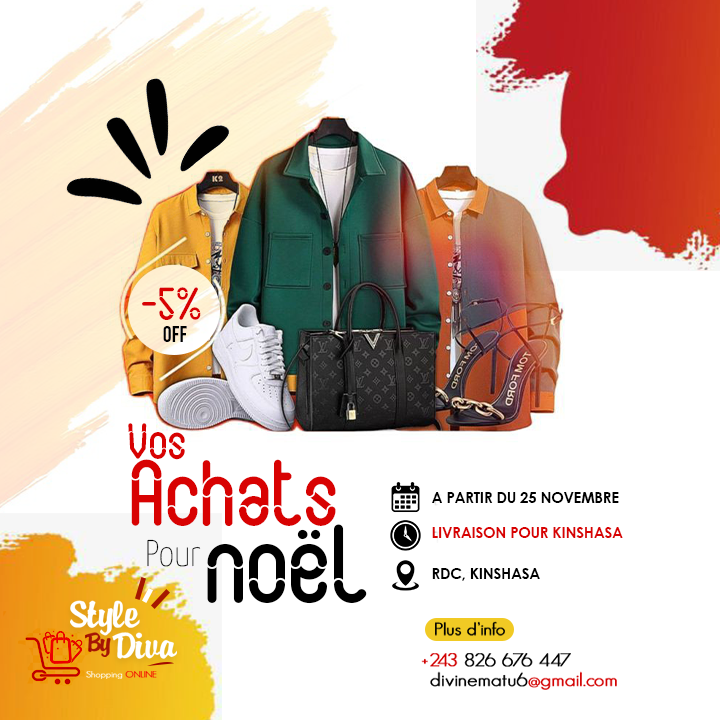
<style>
.page{position:relative;width:720px;height:720px;background:#ffffff}
.page>*{position:absolute;margin:0}
.t1{font:46.7px "Slot-Regular";color:#d80202}
.t2{font:22.4px "BebasNeue-Regular";color:#000000}
.t3{font:51.1px "Slot-Regular";color:#d80202}
.t4{font:94.8px "Slot-Regular";color:#d80202}
.t5{font:14.6px "CenturyGothic-Bold";color:#000000;text-transform:uppercase}
.t6{font:112.5px "Slot-Regular";color:#000000}
.t7{font:14.6px "CenturyGothic-Bold";color:#d80202;text-transform:uppercase}
.t8{font:37px "YanoneKaffeesatz-ExtraLight";color:#000000}
.t9{font:37.7px "Fixthephoto---Buke";color:#ffffff;scale:1.11 1}
.t10{font:16.8px "GeosansLight";color:#000000;font-weight:bold;scale:1.11 1}
.t11{font:26.8px "Fixthephoto---Buke";color:#a51505;scale:1.11 1}
.t12{font:36px "Fixthephoto---Buke";color:#ffffff;scale:1.11 1}
.t13{font:18.1px "GeosansLight";color:#000000;font-weight:bold;scale:1.11 1}
.t14{font:18.1px "GeosansLight";color:#d00000;font-weight:bold;scale:1.11 1}
.t15{font:8.8px "GeosansLight";font-weight:bold;scale:1.11 1}
.t16{font:18.1px "GeosansLight";color:#d30000;font-weight:bold;scale:1.11 1}
</style>
<div class="page">
<p class="t1" style="left:142px;top:287px;width:59px;height:33px">-5%</p>
<p class="t2" style="left:163px;top:326px;width:24px;height:16px">OFF</p>
<p class="t3" style="left:128px;top:423px;width:57px;height:37px">Vos</p>
<p class="t4" style="left:131px;top:459px;width:205px;height:67px">Achats</p>
<p class="t5" style="left:432px;top:492px;width:187px;height:11px">A partir du 25 Novembre</p>
<p class="t6" style="left:207px;top:524px;width:160px;height:80px">noël</p>
<p class="t7" style="left:432px;top:527px;width:191px;height:11px">LIVRAISON POUR KINSHASA</p>
<p class="t8" style="left:147px;top:539px;width:54px;height:28px">Pour</p>
<p class="t5" style="left:432px;top:568px;width:108px;height:13px">RDC, KINSHASA</p>
<p class="t9" style="left:70px;top:600px;width:70px;height:36px">Style</p>
<p class="t10" style="left:435px;top:621px;width:70px;height:15px">Plus d’info</p>
<p class="t11" style="left:85px;top:632px;width:26px;height:25px">By</p>
<p class="t12" style="left:112px;top:632px;width:65px;height:27px">Diva</p>
<p class="t13" style="left:421px;top:653px;width:150px;height:14px"><span class="t14">+243 </span>826 676 447</p>
<p class="t15" style="left:86px;top:671px;width:71px;height:8px">Shopping ONLINE</p>
<p class="t13" style="left:430px;top:671px;width:187px;height:19px">divinematu6<span class="t16">@gmail.com</span></p>
</div>
